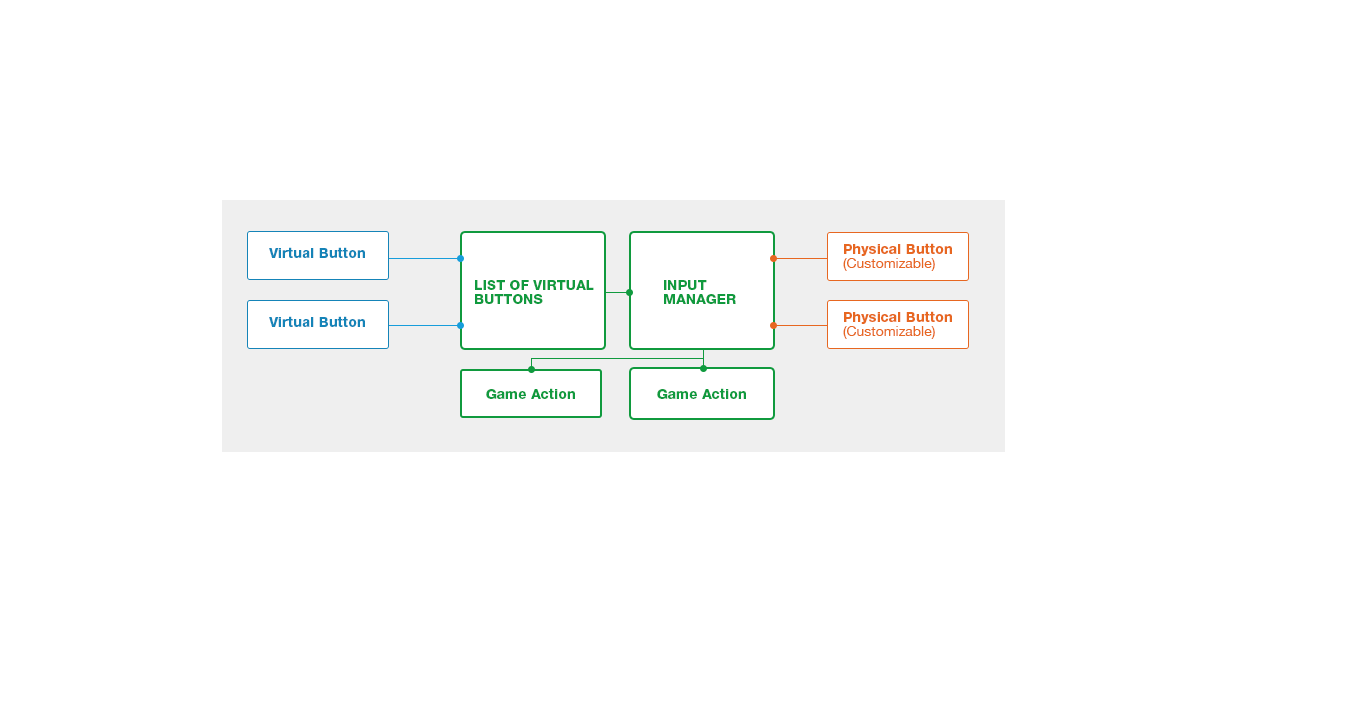
<style>
.page{position:relative;width:1353px;height:710px;background:#ffffff}
.page>*{position:absolute;margin:0}
.t1{font:13.9px/14px "HelveticaNeueCyr-Black";color:#e76721}
.t2{font:13.9px/14px "HelveticaNeue";color:#e76721}
.t3{font:13.9px "HelveticaNeueCyr-Black";color:#1583b7}
.t4{font:13.9px/14px "HelveticaNeueCyr-Black";color:#109a3e;text-transform:uppercase}
.t5{font:13.9px "HelveticaNeueCyr-Black";color:#1584b8}
.t6{font:13.9px "HelveticaNeueCyr-Black";color:#109a3e}
</style>
<div class="page">
<p class="t1" style="left:843px;top:243px;width:109px;height:28px">Physical Button<br><span class="t2">(Customizable)</span></p>
<p class="t3" style="left:269px;top:247px;width:96px;height:11px">Virtual Button</p>
<p class="t4" style="left:475px;top:280px;width:119px;height:24px">list of virtual<br>buttons</p>
<p class="t4" style="left:664px;top:280px;width:72px;height:24px">Input<br>Manager</p>
<p class="t5" style="left:269px;top:316px;width:96px;height:11px">Virtual Button</p>
<p class="t1" style="left:843px;top:311px;width:109px;height:28px">Physical Button<br><span class="t2">(Customizable)</span></p>
<p class="t6" style="left:486px;top:388px;width:89px;height:11px">Game Action</p>
<p class="t6" style="left:657px;top:388px;width:89px;height:11px">Game Action</p>
</div>
